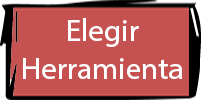
<style>
.page{position:relative;width:201px;height:100px;background:#c65151}
.page>*{position:absolute;margin:0}
.t1{font:31.3px "MyriadHebrew-Regular";color:#ffffff}
</style>
<div class="page">
<p class="t1" style="left:23px;top:18px;width:159px;height:61px;text-align:center">Elegir<br>Herramienta</p>
</div>
